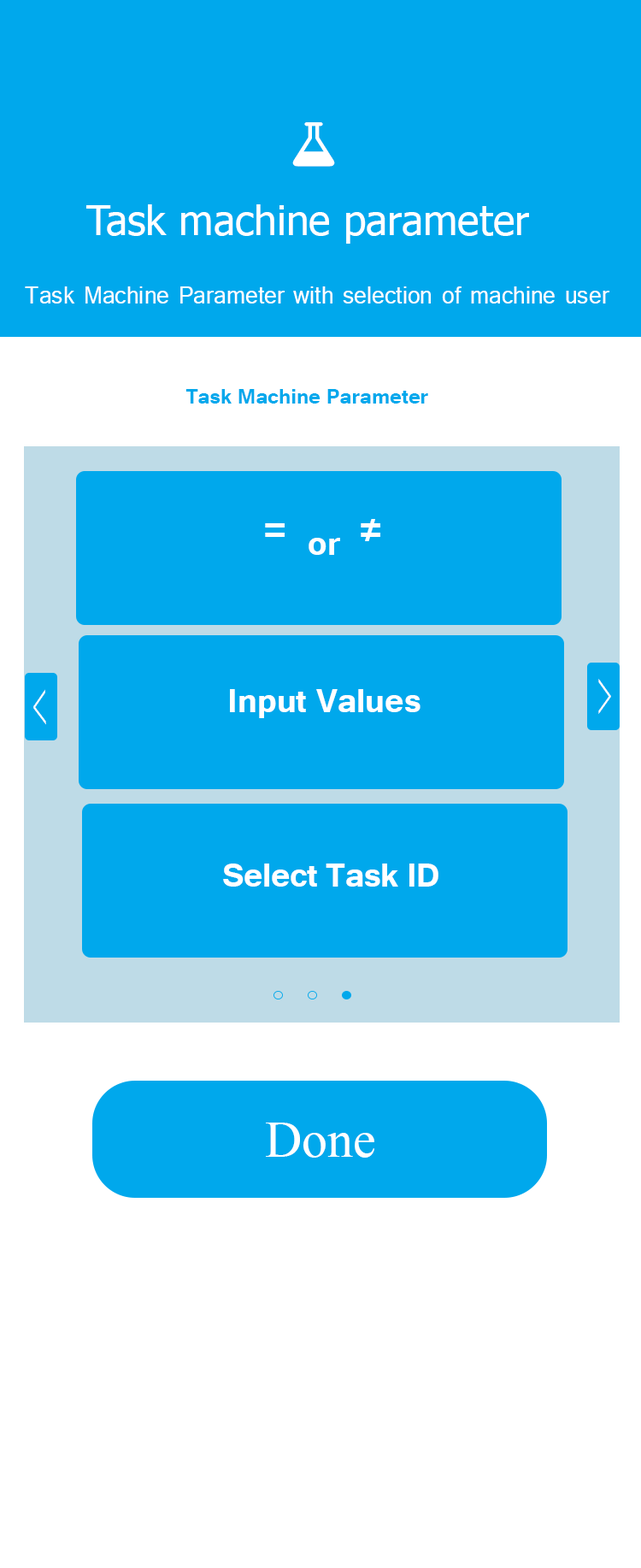
<style>
.page{position:relative;width:641px;height:1568px;background:#00a8ec}
.page>*{position:absolute;margin:0}
.t1{font:41px "Tahoma";color:#ffffff}
.t2{font:30.8px "Tunga";color:#ffffff;scale:0.95 1}
.t3{font:25.6px "Tunga-Bold";color:#00a8ec}
.t4{font:40.1px "Tunga-Bold";color:#ffffff}
.t5{font:51.3px "Tunga-Bold";color:#ffffff}
.t6{font:41px "Tunga-Bold";color:#ffffff}
.t7{font:72.2px "TimesNewRomanPSMT";color:#ffffff;scale:0.31 1}
.t8{font:41px "Tunga-Bold";letter-spacing:-0.01em;color:#ffffff}
.t9{font:51.3px "TimesNewRomanPSMT";color:#ffffff}
</style>
<div class="page">
<p class="t1" style="left:86px;top:204px;width:443px;height:40px">Task machine parameter</p>
<p class="t2" style="left:25px;top:286px;width:585px;height:18px">Task Machine Parameter with selection of machine user</p>
<p class="t3" style="left:186px;top:389px;width:242px;height:15px">Task Machine Parameter</p>
<p class="t4" style="left:365px;top:519px;width:10px;height:22px">/</p>
<p class="t5" style="left:265px;top:523px;width:20px;height:14px">=</p>
<p class="t5" style="left:361px;top:523px;width:19px;height:14px">=</p>
<p class="t6" style="left:309px;top:538px;width:31px;height:17px">or</p>
<p class="t7" style="left:33px;top:689px;width:13px;height:36px;rotate:179deg">&gt;</p>
<p class="t6" style="left:230px;top:689px;width:191px;height:29px">Input Values</p>
<p class="t7" style="left:598px;top:679px;width:13px;height:35px">&gt;</p>
<p class="t8" style="left:223px;top:864px;width:216px;height:23px">Select Task ID</p>
<p class="t9" style="left:266px;top:1123px;width:108px;height:35px">Done</p>
</div>
